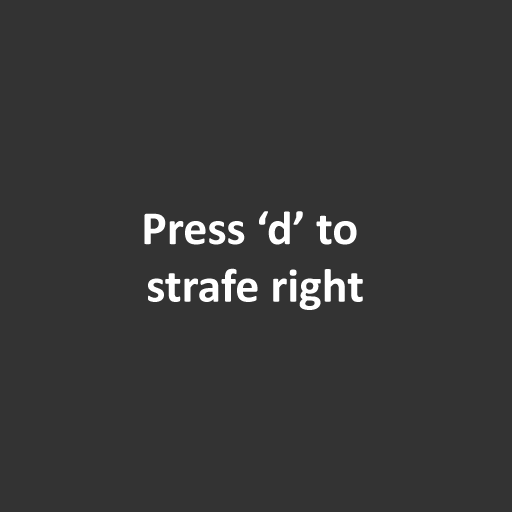
<style>
.page{position:relative;width:512px;height:512px;background:#333333}
.page>*{position:absolute;margin:0}
.t1{font:48px "Calibri-Bold";color:#ffffff}
</style>
<div class="page">
<p class="t1" style="left:144px;top:211px;width:219px;height:99px;text-align:center">Press ‘d’ to <br>strafe right</p>
</div>
